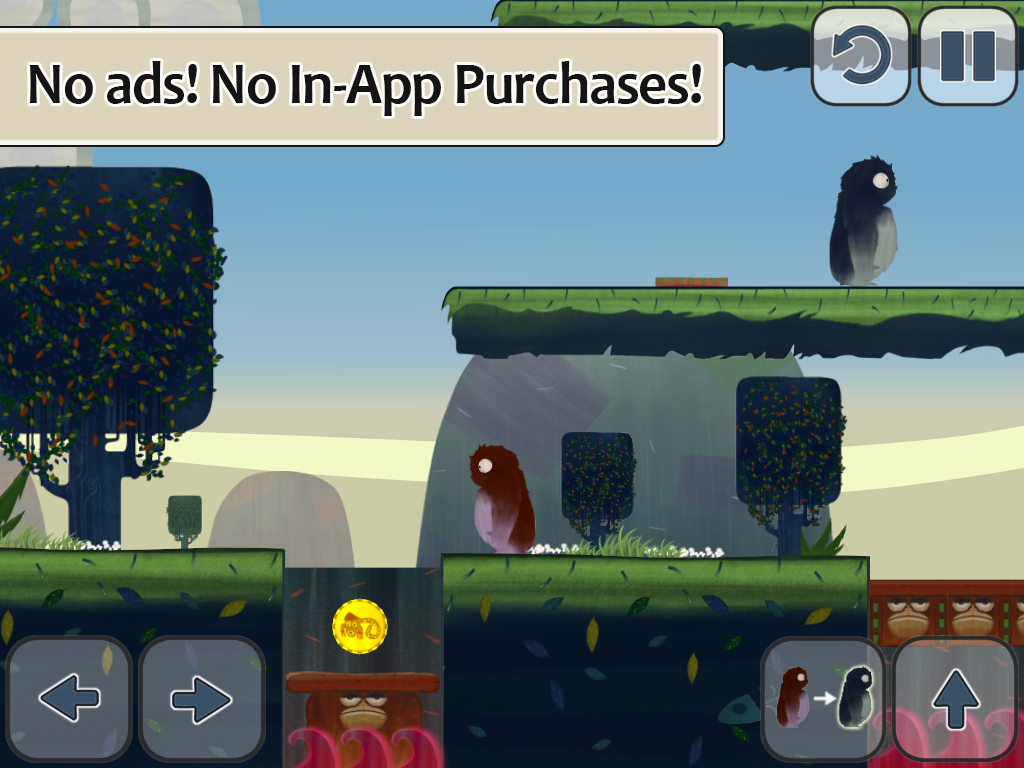
<style>
.page{position:relative;width:1024px;height:768px}
.page>*{position:absolute;margin:0}
.t1{font:60.4px "Candara-Bold";letter-spacing:-0.02em;color:#141414;scale:0.94 1}
</style>
<div class="page">
<p class="t1" style="left:30px;top:61px;width:671px;height:55px">No ads! No In-App Purchases!</p>
</div>
